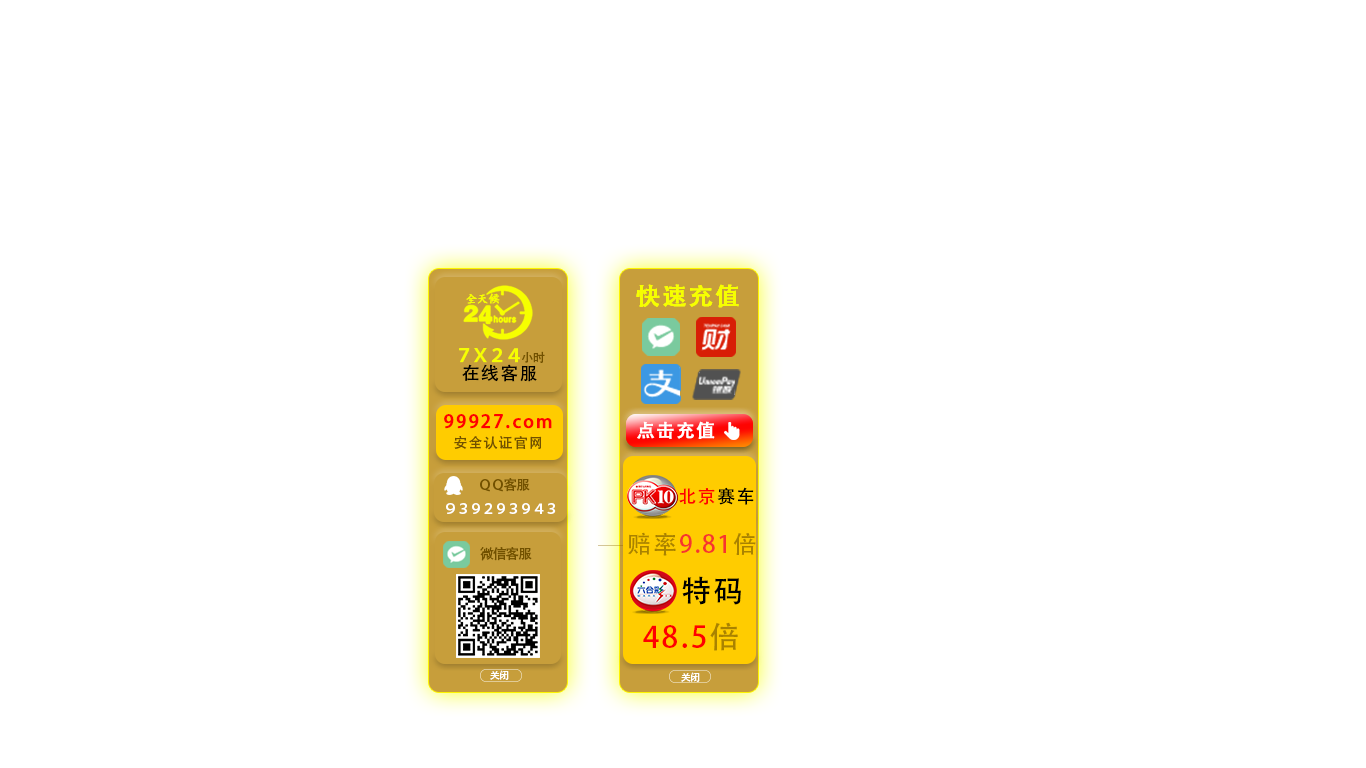
<style>
.page{position:relative;width:1366px;height:768px;background:#ffffff}
.page>*{position:absolute;margin:0}
.t1{font:12px "DFKaiShu-SB-Estd-BF";letter-spacing:-0.075em;color:#f6ff00;font-weight:bold}
.t2{font:24px "AdobeHeitiStd-Regular";letter-spacing:0.075em;color:#f6ff00;font-weight:bold}
.t3{font:18px/18px "AdobeHeitiStd-Regular";letter-spacing:-0.1em;color:#f6ff00;font-weight:bold}
.t4{font:12px/18px "AdobeHeitiStd-Regular";letter-spacing:-0.075em;color:#725100}
.t5{font:18px/18px "AdobeHeitiStd-Regular";letter-spacing:0.075em;color:#000000}
.t6{font:18px "AdobeHeitiStd-Regular";letter-spacing:0.1em;color:#ff0000;font-weight:bold}
.t7{font:18px "AdobeHeitiStd-Regular";letter-spacing:0.075em;color:#ffffff;font-weight:bold}
.t8{font:14px "AdobeHeitiStd-Regular";letter-spacing:0.075em;color:#725100}
.t9{font:14px "AdobeHeitiStd-Regular";letter-spacing:-0.1em;color:#725100}
.t10{font:18px "AdobeHeitiStd-Regular";letter-spacing:0.075em;color:#ff0000}
.t11{font:18px "AdobeHeitiStd-Regular";letter-spacing:0.075em;color:#000000}
.t12{font:14px "AdobeHeitiStd-Regular";letter-spacing:-0.1em;color:#ffffff}
.t13{font:24px "AdobeHeitiStd-Regular";letter-spacing:0.075em;color:#f7352e}
.t14{font:24px "AdobeHeitiStd-Regular";letter-spacing:0.075em;color:#a98200}
.t15{font:30px "AdobeHeitiStd-Regular";letter-spacing:0.075em;color:#000000}
.t16{font:30px "AdobeHeitiStd-Regular";letter-spacing:0.075em;color:#ff0000}
.t17{font:30px "AdobeHeitiStd-Regular";letter-spacing:0.075em;color:#a98200}
.t18{font:10px "AdobeHeitiStd-Regular";letter-spacing:-0.075em;color:#ffffff}
</style>
<div class="page">
<p class="t1" style="left:466px;top:293px;width:34px;height:11px">全天候</p>
<p class="t2" style="left:636px;top:284px;width:103px;height:24px">快速充值</p>
<p class="t2" style="left:636px;top:284px;width:103px;height:24px">快速充值</p>
<p class="t3" style="left:459px;top:348px;width:86px;height:34px;text-align:center">７Ｘ２４<span class="t4">小时<br></span><span class="t5">在线客服</span></p>
<p class="t6" style="left:444px;top:414px;width:108px;height:15px">99927.com</p>
<p class="t7" style="left:637px;top:421px;width:78px;height:18px">点击充值</p>
<p class="t7" style="left:637px;top:421px;width:78px;height:18px">点击充值</p>
<p class="t8" style="left:454px;top:436px;width:88px;height:14px">安全认证官网</p>
<p class="t9" style="left:480px;top:478px;width:50px;height:14px">ＱＱ客服</p>
<p class="t10" style="left:679px;top:487px;width:75px;height:18px">北京<span class="t11">赛车</span></p>
<p class="t12" style="left:446px;top:503px;width:110px;height:11px">９３９２９３９４３</p>
<p class="t13" style="left:628px;top:532px;width:128px;height:24px"><span class="t14">赔率</span>9.81<span class="t14">倍</span></p>
<p class="t9" style="left:480px;top:547px;width:52px;height:14px">微信客服</p>
<p class="t15" style="left:682px;top:576px;width:59px;height:29px">特码</p>
<p class="t16" style="left:643px;top:622px;width:95px;height:29px">48.5<span class="t17">倍</span></p>
<p class="t18" style="left:490px;top:670px;width:19px;height:10px">关闭</p>
<p class="t18" style="left:681px;top:672px;width:19px;height:10px">关闭</p>
</div>
